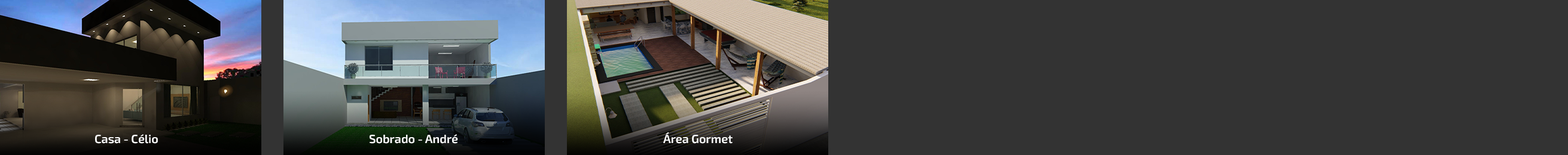
<style>
.page{position:relative;width:1568px;height:155px;background:#333333}
.page>*{position:absolute;margin:0}
.t1{font:11.9px "Exo2-SemiBold";color:#ffffff}
</style>
<div class="page">
<p class="t1" style="left:95px;top:135px;width:63px;height:9px">Casa - Célio</p>
<p class="t1" style="left:370px;top:135px;width:88px;height:9px">Sobrado - André</p>
<p class="t1" style="left:663px;top:132px;width:70px;height:12px">Área Gormet</p>
</div>
